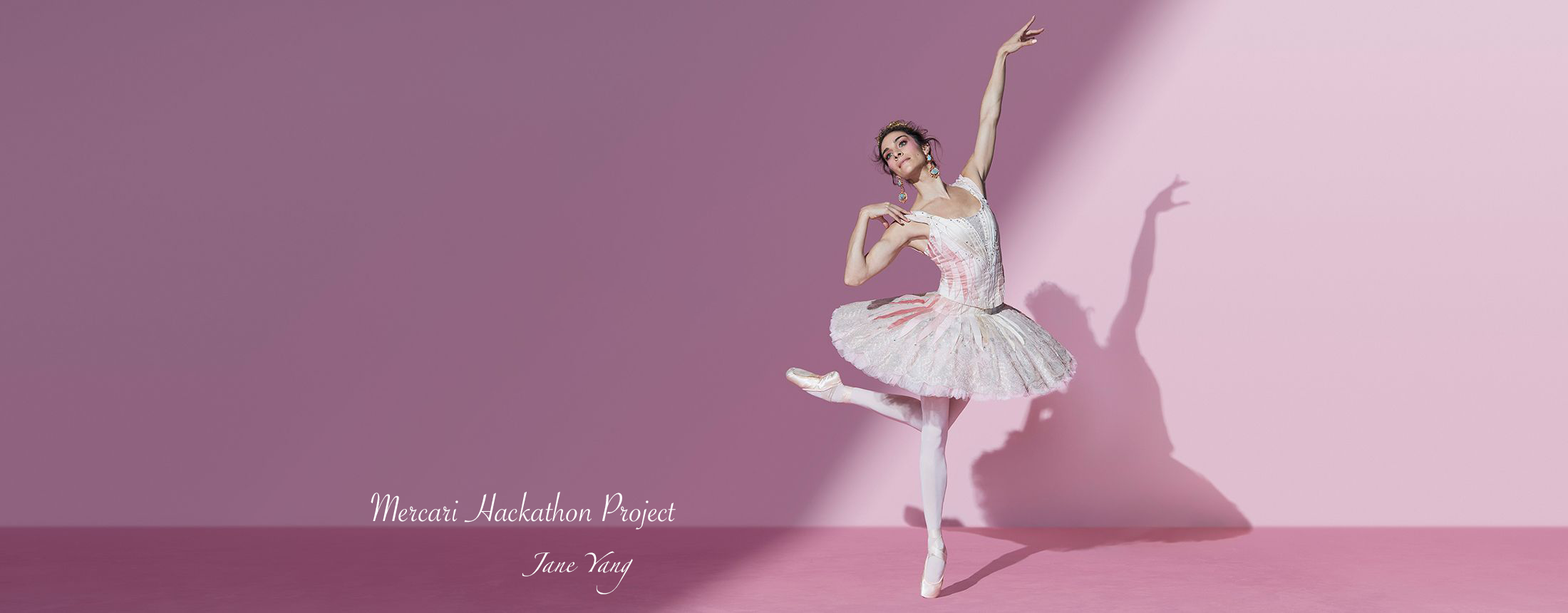
<style>
.page{position:relative;width:1568px;height:613px}
.page>*{position:absolute;margin:0}
.t1{font:42.8px "SavoyeLetPlain";color:#ffffff}
.t2{font:17.1px/8.6px "Zapfino";color:#ffffff}
</style>
<div class="page">
<p class="t1" style="left:371px;top:491px;width:305px;height:39px">Mercari Hackathon Project</p>
<p class="t2" style="left:522px;top:551px;width:111px;height:43px">Jane Yang</p>
</div>
